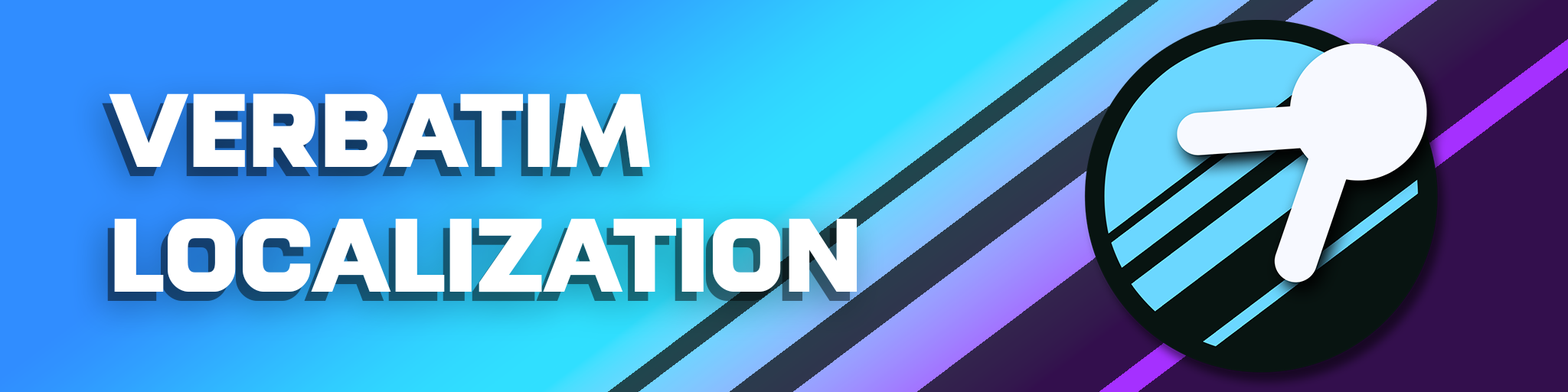
<style>
.page{position:relative;width:1568px;height:392px}
.page>*{position:absolute;margin:0}
.t1{font:104.1px "HXNBlack";color:#ffffff}
</style>
<div class="page">
<p class="t1" style="left:109px;top:93px;width:749px;height:199px">Verbatim<br>Localization</p>
</div>
